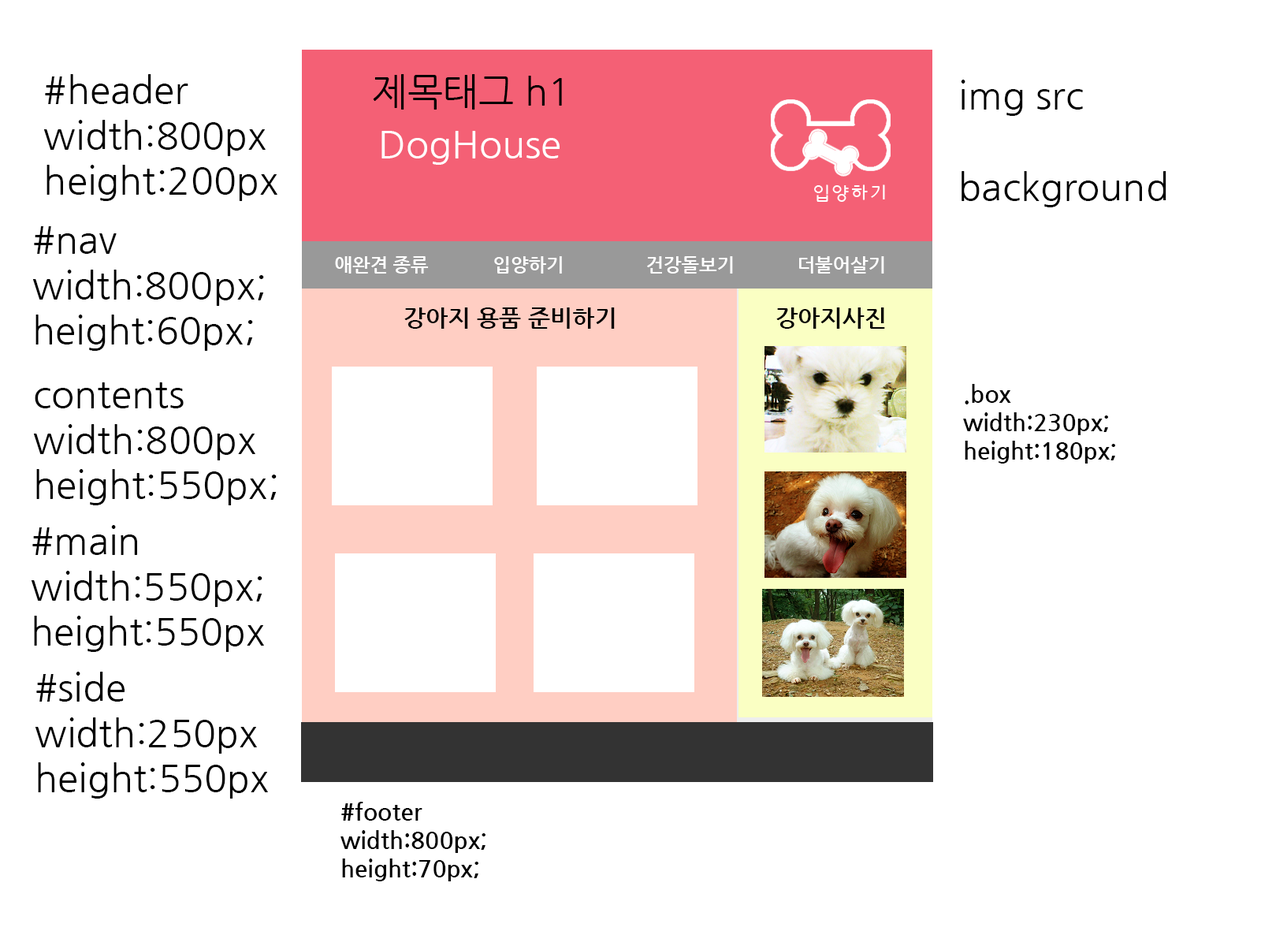
<style>
.page{position:relative;width:1261px;height:946px;background:#ffffff}
.page>*{position:absolute;margin:0}
.t1{font:37.8px "NanumGothic";color:#010101}
.t2{font:37.8px "NanumGothic";color:#000000}
.t3{font:37.8px "NanumGothic";color:#ffffff}
.t4{font:18.9px "NanumGothicBold";color:#ffffff}
.t5{font:23.6px "NanumGothicBold";color:#000000}
</style>
<div class="page">
<p class="t1" style="left:44px;top:74px;width:233px;height:127px">#header<br>width:800px<br>height:200px</p>
<p class="t2" style="left:373px;top:74px;width:189px;height:36px">제목태그 h1</p>
<p class="t2" style="left:961px;top:80px;width:205px;height:127px">img src<br><br>background</p>
<p class="t3" style="left:381px;top:131px;width:179px;height:34px">DogHouse</p>
<p class="t2" style="left:33px;top:226px;width:231px;height:125px">#nav<br>width:800px;<br>height:60px;</p>
<p class="t4" style="left:335px;top:256px;width:94px;height:17px">애완견 종류</p>
<p class="t4" style="left:494px;top:256px;width:68px;height:17px">입양하기</p>
<p class="t4" style="left:647px;top:256px;width:86px;height:17px">건강돌보기</p>
<p class="t4" style="left:799px;top:256px;width:85px;height:17px">더불어살기</p>
<p class="t5" style="left:404px;top:307px;width:211px;height:22px">강아지 용품 준비하기</p>
<p class="t5" style="left:776px;top:307px;width:109px;height:22px">강아지사진</p>
<p class="t1" style="left:34px;top:382px;width:243px;height:123px">contents<br>width:800px<br>height:550px;</p>
<p class="t5" style="left:963px;top:384px;width:152px;height:79px">.box<br>width:230px;<br>height:180px;</p>
<p class="t2" style="left:32px;top:525px;width:232px;height:127px">#main<br>width:550px;<br>height:550px</p>
<p class="t2" style="left:35px;top:671px;width:233px;height:127px">#side<br>width:250px<br>height:550px</p>
<p class="t5" style="left:340px;top:801px;width:145px;height:80px">#footer<br>width:800px;<br>height:70px;</p>
</div>
